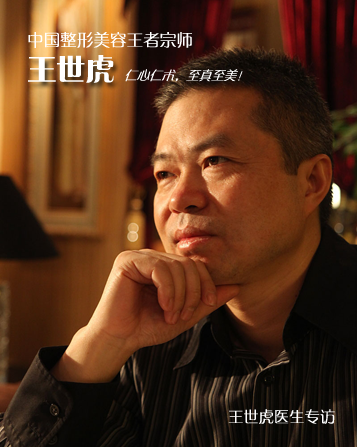
<style>
.page{position:relative;width:357px;height:447px}
.page>*{position:absolute;margin:0}
.t1{font:16.6px "FZZQJW--GB1-0";color:#ffffff}
.t2{font:29.2px "FZCQJW--GB1-0";color:#ffffff}
.t3{font:13.3px "FZZQJW--GB1-0";color:#ffffff;scale:0.94 1}
.t4{font:15.3px "FZZQJW--GB1-0";color:#ffffff}
</style>
<div class="page">
<p class="t1" style="left:28px;top:32px;width:164px;height:16px">中国整形美容王者宗师</p>
<p class="t2" style="left:28px;top:55px;width:86px;height:28px">王世虎</p>
<p class="t3" style="left:125px;top:69px;width:118px;height:13px">仁心仁术，至真至美！</p>
<p class="t4" style="left:228px;top:409px;width:107px;height:15px">王世虎医生专访</p>
</div>
